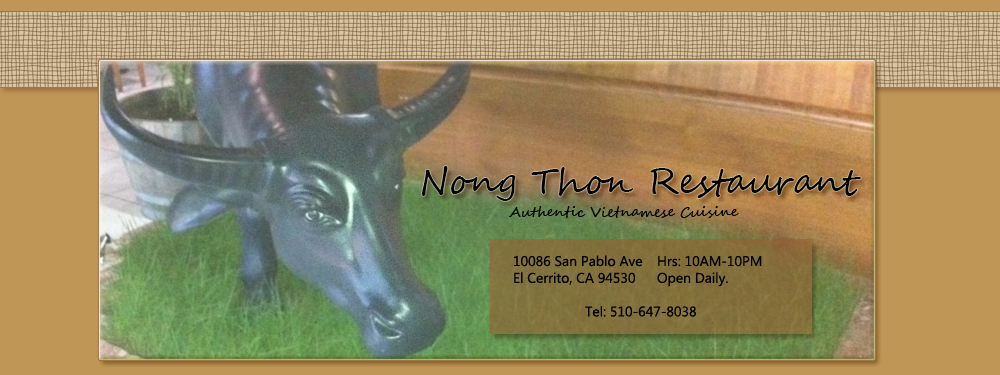
<style>
.page{position:relative;width:1000px;height:375px;background:#c09656}
.page>*{position:absolute;margin:0}
.t1{font:36px "SegoeScript";color:#000000}
.t2{font:14px "SegoeScript";color:#000000}
.t3{font:14px "MicrosoftNewTaiLue";color:#000000}
</style>
<div class="page">
<p class="t1" style="left:422px;top:166px;width:439px;height:35px">Nong Thon Restaurant</p>
<p class="t2" style="left:509px;top:206px;width:230px;height:12px">Authentic Vietnamese Cuisine</p>
<p class="t3" style="left:514px;top:255px;width:248px;height:62px">10086 San Pablo Ave Hrs: 10AM-10PM<br>El Cerrito, CA 94530 Open Daily.<br><br>  Tel: 510-647-8038</p>
</div>
